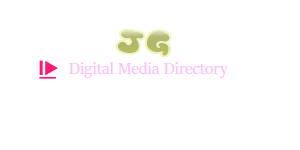
<style>
.page{position:relative;width:300px;height:150px;background:#ffffff}
.page>*{position:absolute;margin:0}
.t1{font:18px "SitkaBanner";color:#ffbdff}
</style>
<div class="page">
<p class="t1" style="left:69px;top:62px;width:160px;height:16px">Digital Media Directory</p>
</div>
